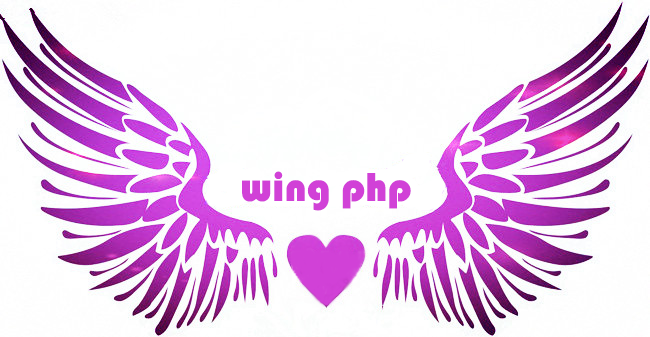
<style>
.page{position:relative;width:650px;height:337px;background:#ffffff}
.page>*{position:absolute;margin:0}
.t1{font:41.7px "STHupo";color:#d141d7}
</style>
<div class="page">
<p class="t1" style="left:242px;top:171px;width:169px;height:40px">wing php</p>
</div>
